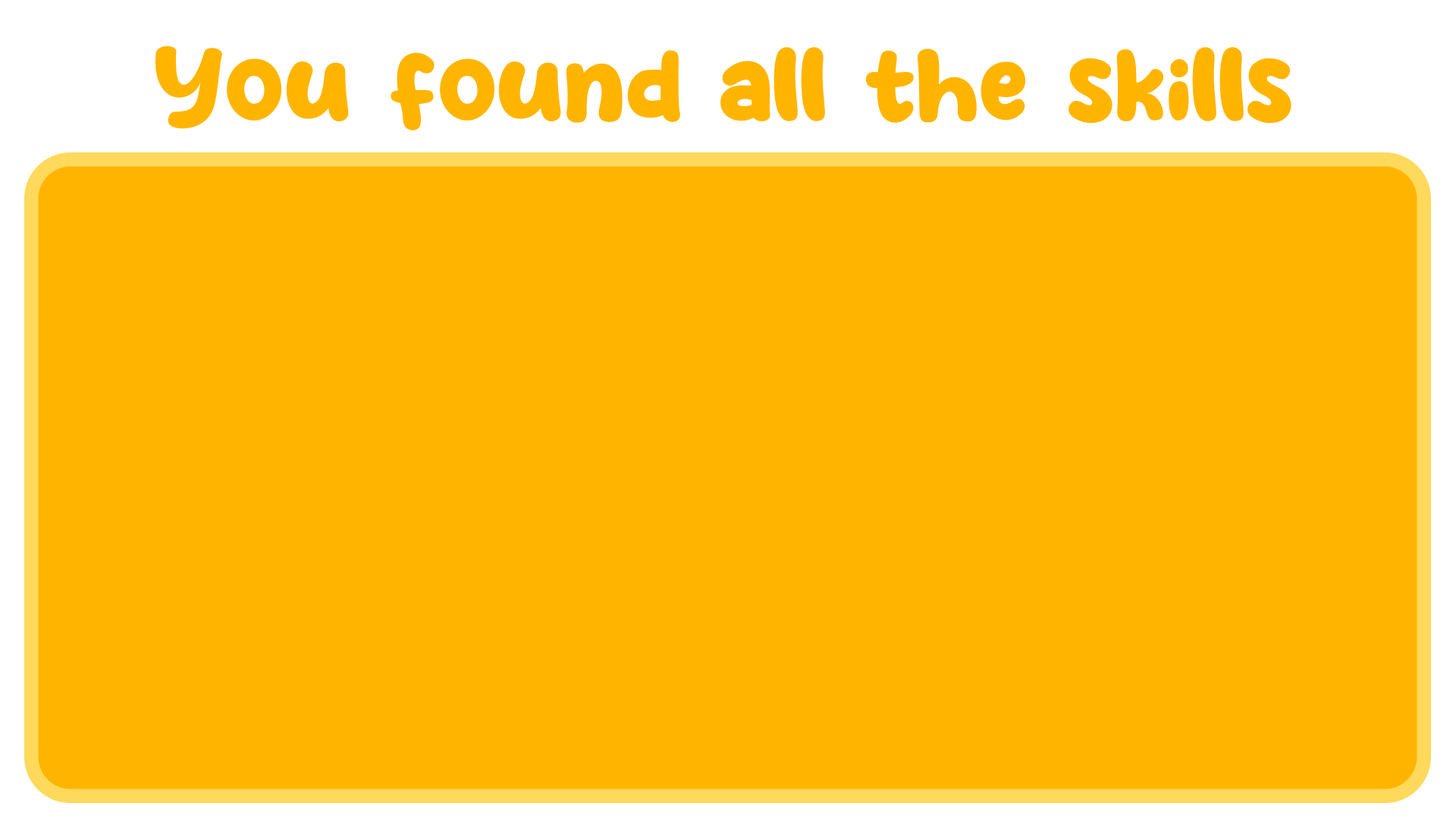
<style>
.page{position:relative;width:1456px;height:819px;background:#ffb500}
.page>*{position:absolute;margin:0}
.t1{font:93.2px "Purple-Smile";color:#ffb500}
</style>
<div class="page">
<p class="t1" style="left:155px;top:45px;width:1136px;height:85px">You found all the skills</p>
</div>
